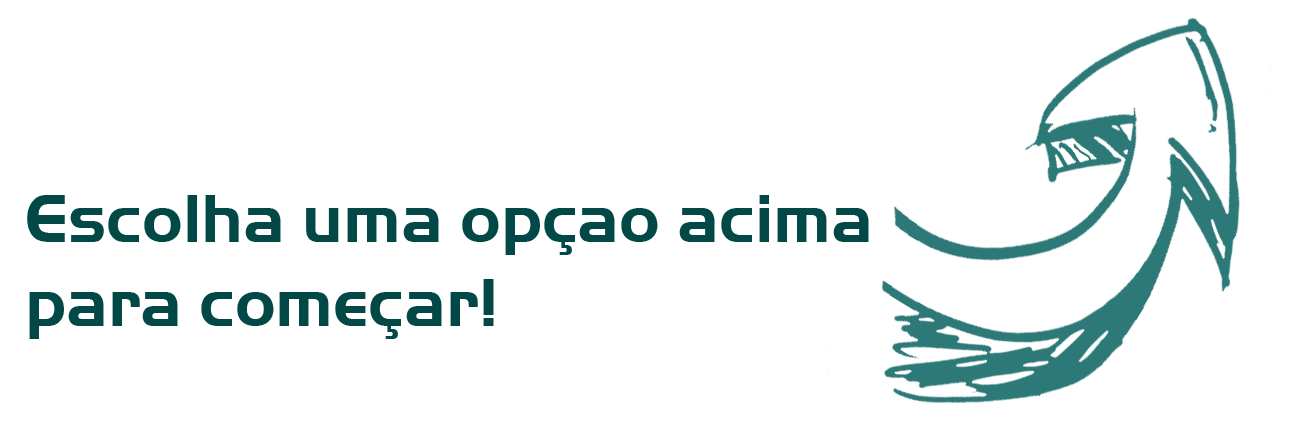
<style>
.page{position:relative;width:1299px;height:431px;background:#ffffff}
.page>*{position:absolute;margin:0}
.t1{font:70px "HandelGotD-Bold";color:#014846}
</style>
<div class="page">
<p class="t1" style="left:27px;top:195px;width:842px;height:144px">Escolha uma opçao acima<br>para começar!</p>
</div>
